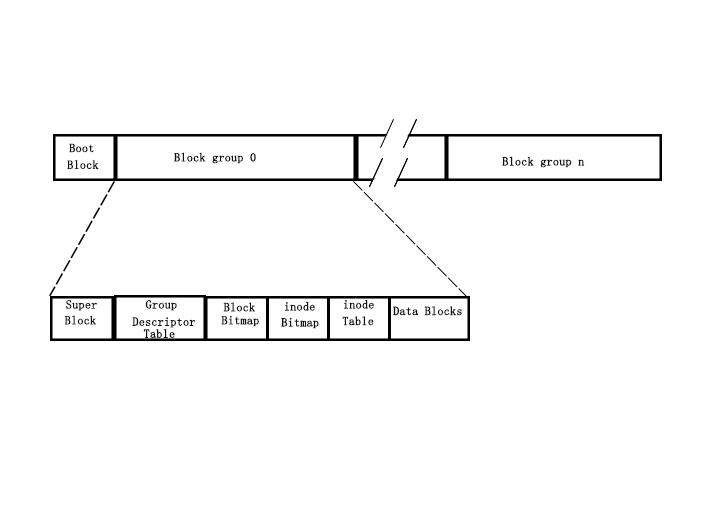
<style>
.page{position:relative;width:709px;height:510px;background:#ffffff}
.page>*{position:absolute;margin:0}
.t1{font:12px "FangSong";color:#111010;font-weight:bold}
</style>
<div class="page">
<p class="t1" style="left:69px;top:143px;width:25px;height:10px">Boot</p>
<p class="t1" style="left:67px;top:160px;width:32px;height:10px">Block</p>
<p class="t1" style="left:174px;top:152px;width:82px;height:12px">Block group 0</p>
<p class="t1" style="left:502px;top:156px;width:83px;height:12px">Block group n</p>
<p class="t1" style="left:66px;top:300px;width:31px;height:11px">Super</p>
<p class="t1" style="left:145px;top:300px;width:32px;height:11px">Group</p>
<p class="t1" style="left:223px;top:302px;width:32px;height:10px">Block</p>
<p class="t1" style="left:285px;top:301px;width:30px;height:10px">inode</p>
<p class="t1" style="left:344px;top:299px;width:30px;height:10px">inode</p>
<p class="t1" style="left:64px;top:315px;width:32px;height:10px">Block</p>
<p class="t1" style="left:132px;top:317px;width:64px;height:11px">Descriptor</p>
<p class="t1" style="left:221px;top:315px;width:38px;height:12px">Bitmap</p>
<p class="t1" style="left:281px;top:318px;width:38px;height:11px">Bitmap</p>
<p class="t1" style="left:342px;top:316px;width:32px;height:10px">Table</p>
<p class="t1" style="left:393px;top:306px;width:69px;height:10px">Data Blocks</p>
<p class="t1" style="left:143px;top:329px;width:32px;height:9px">Table</p>
</div>
